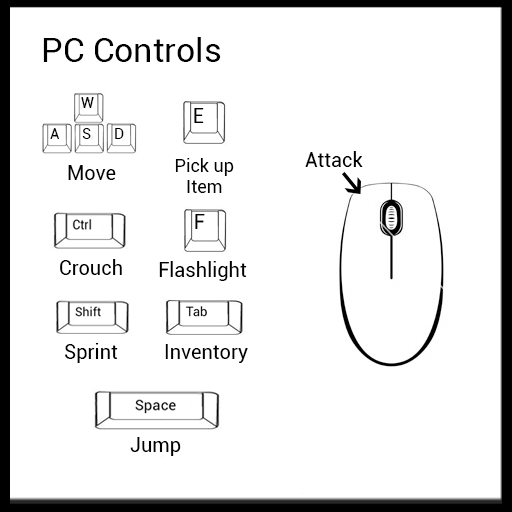
<style>
.page{position:relative;width:512px;height:512px;background:#ffffff}
.page>*{position:absolute;margin:0}
.t1{font:34px "Roboto-Regular";color:#000000}
.t2{font:15px "Roboto-Regular";color:#000000}
.t3{font:20px "Roboto-Regular";color:#000000}
.t4{font:18px "Roboto-Regular";color:#000000}
</style>
<div class="page">
<p class="t1" style="left:43px;top:37px;width:178px;height:25px">PC Controls</p>
<p class="t2" style="left:81px;top:97px;width:13px;height:11px">W</p>
<p class="t3" style="left:194px;top:108px;width:10px;height:15px">E</p>
<p class="t2" style="left:50px;top:128px;width:10px;height:11px">A</p>
<p class="t2" style="left:82px;top:128px;width:9px;height:11px">S</p>
<p class="t2" style="left:115px;top:128px;width:9px;height:11px">D</p>
<p class="t4" style="left:175px;top:158px;width:59px;height:35px;text-align:center">Pick up<br>Item</p>
<p class="t3" style="left:305px;top:151px;width:58px;height:16px">Attack</p>
<p class="t3" style="left:68px;top:165px;width:48px;height:15px">Move</p>
<p class="t3" style="left:195px;top:214px;width:10px;height:15px">F</p>
<p class="t3" style="left:60px;top:259px;width:62px;height:16px">Crouch</p>
<p class="t3" style="left:159px;top:261px;width:88px;height:20px">Flashlight</p>
<p class="t3" style="left:65px;top:343px;width:53px;height:20px">Sprint</p>
<p class="t3" style="left:165px;top:344px;width:83px;height:19px">Inventory</p>
<p class="t3" style="left:130px;top:437px;width:51px;height:19px">Jump</p>
</div>
